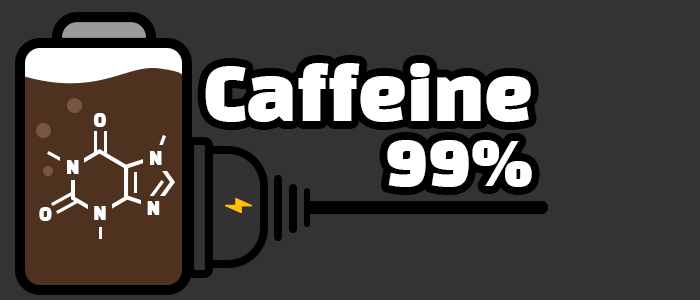
<style>
.page{position:relative;width:700px;height:300px;background:#333333}
.page>*{position:absolute;margin:0}
.t1{font:72px/65px "BlackHanSans-Regular";color:#ffffff}
.t2{font:17.6px "BlackHanSans-Regular";color:#ffffff}
</style>
<div class="page">
<p class="t1" style="left:205px;top:63px;width:327px;height:124px;text-align:right">Caffeine<br>99%</p>
<p class="t2" style="left:93px;top:113px;width:13px;height:14px">O</p>
<p class="t2" style="left:67px;top:160px;width:12px;height:14px">N</p>
<p class="t2" style="left:150px;top:151px;width:12px;height:14px">N</p>
<p class="t2" style="left:39px;top:207px;width:13px;height:14px">O</p>
<p class="t2" style="left:94px;top:206px;width:12px;height:14px">N</p>
<p class="t2" style="left:147px;top:201px;width:13px;height:14px">N</p>
</div>
